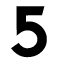
<style>
.page{position:relative;width:64px;height:64px;background:#ffffff}
.page>*{position:absolute;margin:0}
.t1{font:66.7px "(ÇÑ)°¢¸Ó¸®D";color:#000000}
</style>
<div class="page">
<p class="t1" style="left:11px;top:6px;width:36px;height:52px">5</p>
</div>
